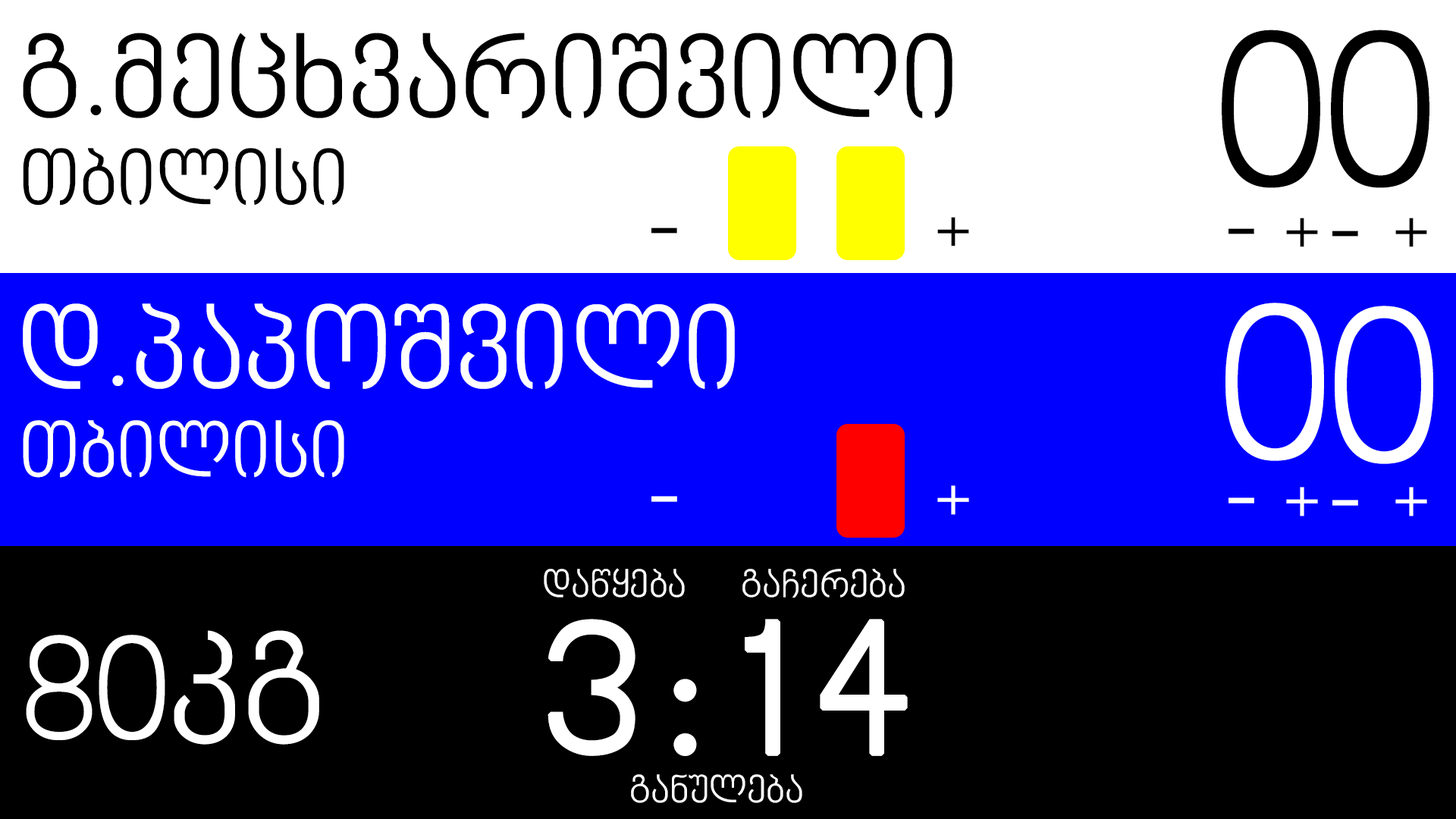
<style>
.page{position:relative;width:1456px;height:819px;background:#000000}
.page>*{position:absolute;margin:0}
.t1{font:227.5px "BPGNinoMtavruli";color:#000000}
.t2{font:113.7px "BPGNinoMtavruli";color:#000000}
.t3{font:75.8px "BPGNinoMtavruli";color:#000000}
.t4{font:113.7px "BPGNinoMtavruli";color:#ffffff}
.t5{font:227.5px "BPGNinoMtavruli";color:#ffffff}
.t6{font:75.8px "BPGNinoMtavruli";color:#ffffff}
.t7{font:37.9px "BPGNinoMtavruli";color:#ffffff}
.t8{font:189.6px "BPGNinoMtavruli";letter-spacing:0.1em;color:#ffffff;font-weight:bold}
.t9{font:151.7px "BPGNinoMtavruli";color:#ffffff}
</style>
<div class="page">
<p class="t1" style="left:1222px;top:30px;width:98px;height:158px">0</p>
<p class="t1" style="left:1331px;top:30px;width:98px;height:158px">0</p>
<p class="t2" style="left:23px;top:33px;width:929px;height:85px">გ.მეცხვარიშვილი</p>
<p class="t3" style="left:23px;top:148px;width:321px;height:58px">თბილისი</p>
<p class="t3" style="left:937px;top:217px;width:32px;height:29px">+</p>
<p class="t3" style="left:1286px;top:218px;width:32px;height:29px">+</p>
<p class="t3" style="left:1395px;top:218px;width:32px;height:29px">+</p>
<p class="t3" style="left:651px;top:227px;width:26px;height:7px">-</p>
<p class="t3" style="left:1228px;top:228px;width:26px;height:6px">-</p>
<p class="t3" style="left:1332px;top:231px;width:26px;height:6px">-</p>
<p class="t4" style="left:23px;top:303px;width:712px;height:86px">დ.პაპოშვილი</p>
<p class="t5" style="left:1225px;top:303px;width:99px;height:158px">0</p>
<p class="t5" style="left:1335px;top:306px;width:98px;height:158px">0</p>
<p class="t6" style="left:23px;top:420px;width:321px;height:58px">თბილისი</p>
<p class="t6" style="left:937px;top:485px;width:32px;height:30px">+</p>
<p class="t6" style="left:651px;top:496px;width:26px;height:6px">-</p>
<p class="t6" style="left:1228px;top:497px;width:26px;height:7px">-</p>
<p class="t6" style="left:1286px;top:487px;width:32px;height:29px">+</p>
<p class="t6" style="left:1395px;top:487px;width:32px;height:29px">+</p>
<p class="t6" style="left:1332px;top:500px;width:26px;height:6px">-</p>
<p class="t7" style="left:544px;top:568px;width:141px;height:30px">დაწყება</p>
<p class="t7" style="left:742px;top:569px;width:163px;height:29px">გაჩერება</p>
<p class="t8" style="left:548px;top:619px;width:360px;height:137px">3:14</p>
<p class="t9" style="left:26px;top:630px;width:293px;height:115px">80კგ</p>
<p class="t7" style="left:631px;top:774px;width:171px;height:29px">განულება</p>
</div>
